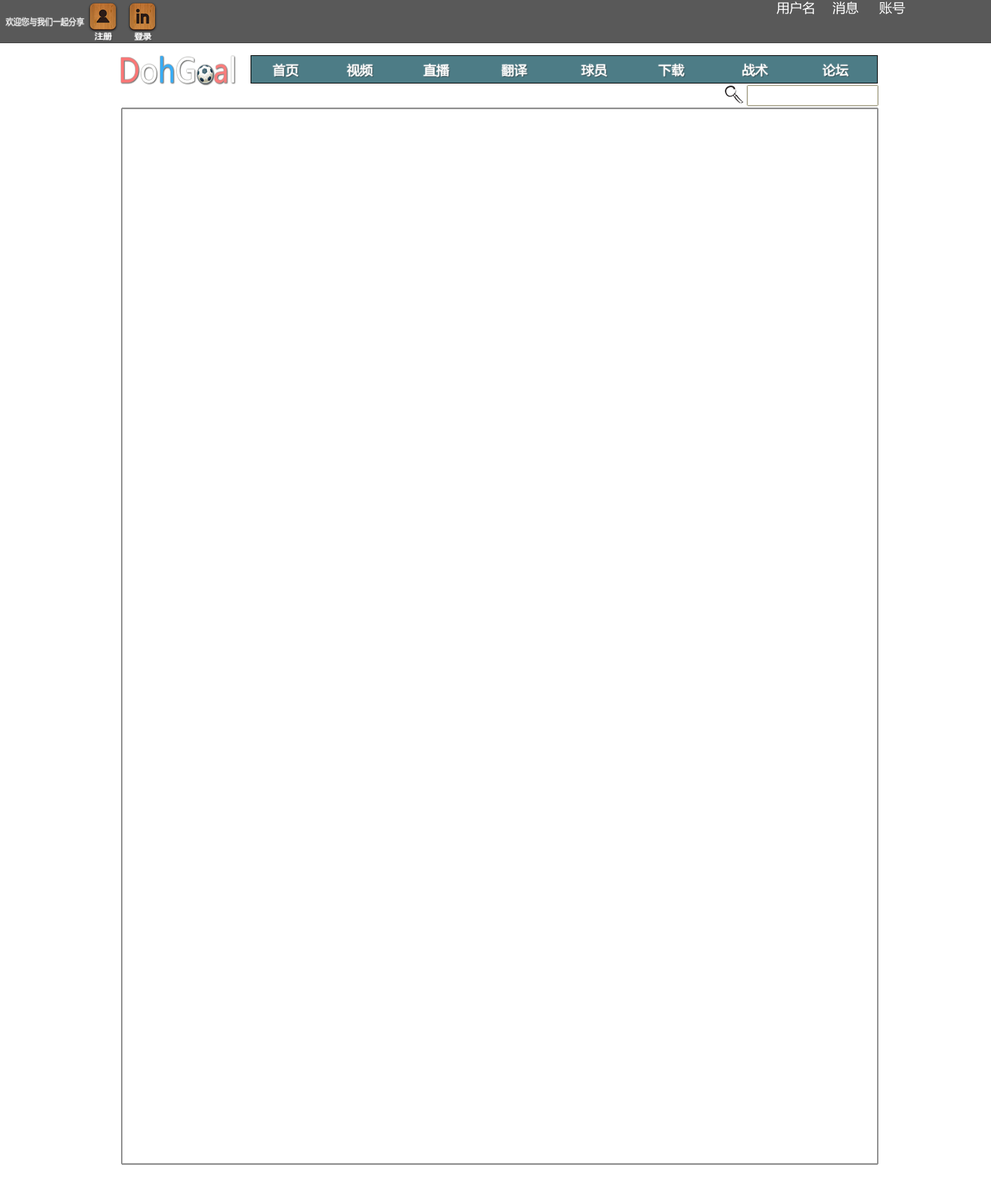
<style>
.page{position:relative;width:991px;height:1203px;background:#ffffff}
.page>*{position:absolute;margin:0}
.t1{font:12.9px "MicrosoftYaHei";color:#ffffff}
.t2{font:9.1px "MicrosoftYaHei";color:#ffffff;scale:0.87 1}
.t3{font:8px "MicrosoftYaHei";color:#ffffff;scale:1.05 1}
</style>
<div class="page">
<p class="t1" style="left:776px;top:1px;width:38px;height:13px">用户名</p>
<p class="t1" style="left:832px;top:1px;width:27px;height:13px">消息</p>
<p class="t1" style="left:879px;top:1px;width:26px;height:13px">账号</p>
<p class="t2" style="left:6px;top:17px;width:78px;height:10px">欢迎您与我们一起分享</p>
<p class="t3" style="left:95px;top:32px;width:17px;height:8px">注册</p>
<p class="t3" style="left:134px;top:33px;width:17px;height:7px">登录</p>
<p class="t1" style="left:273px;top:64px;width:26px;height:13px">首页</p>
<p class="t1" style="left:347px;top:64px;width:26px;height:13px">视频</p>
<p class="t1" style="left:423px;top:64px;width:26px;height:13px">直播</p>
<p class="t1" style="left:501px;top:64px;width:26px;height:12px">翻译</p>
<p class="t1" style="left:581px;top:64px;width:26px;height:12px">球员</p>
<p class="t1" style="left:658px;top:64px;width:26px;height:12px">下载</p>
<p class="t1" style="left:743px;top:64px;width:25px;height:12px">战术</p>
<p class="t1" style="left:822px;top:64px;width:27px;height:12px">论坛</p>
</div>
